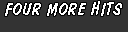
<style>
.page{position:relative;width:128px;height:32px;background:#333333}
.page>*{position:absolute;margin:0}
.t1{font:18px "DomDiagonalBT-Regular";letter-spacing:0.025em;color:#ffffff}
</style>
<div class="page">
<p class="t1" style="left:5px;top:1px;width:117px;height:15px">FOUR MORE HITS</p>
</div>
